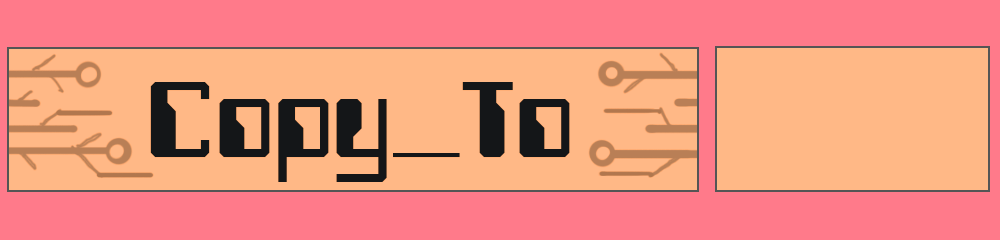
<style>
.page{position:relative;width:1000px;height:240px;background:#ffb886}
.page>*{position:absolute;margin:0}
.t1{font:125px "Computerfont";color:#171615}
</style>
<div class="page">
<p class="t1" style="left:150px;top:82px;width:420px;height:100px">Copy_To</p>
</div>
